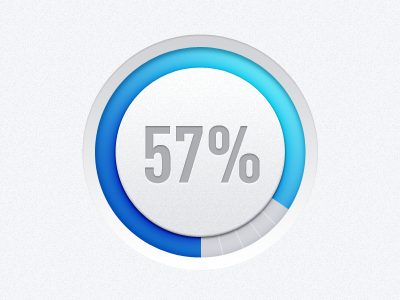
<style>
.page{position:relative;width:400px;height:300px}
.page>*{position:absolute;margin:0}
.t1{font:79.1px "DINPro-CondBold";color:#adaeb2}
</style>
<div class="page">
<p class="t1" style="left:145px;top:125px;width:115px;height:59px">57%</p>
</div>
